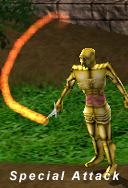
<style>
.page{position:relative;width:128px;height:188px}
.page>*{position:absolute;margin:0}
.t1{font:12px "Arial-BoldItalicMT";letter-spacing:0.18em;color:#ffffff}
</style>
<div class="page">
<p class="t1" style="left:9px;top:171px;width:111px;height:12px">Special Attack</p>
</div>
